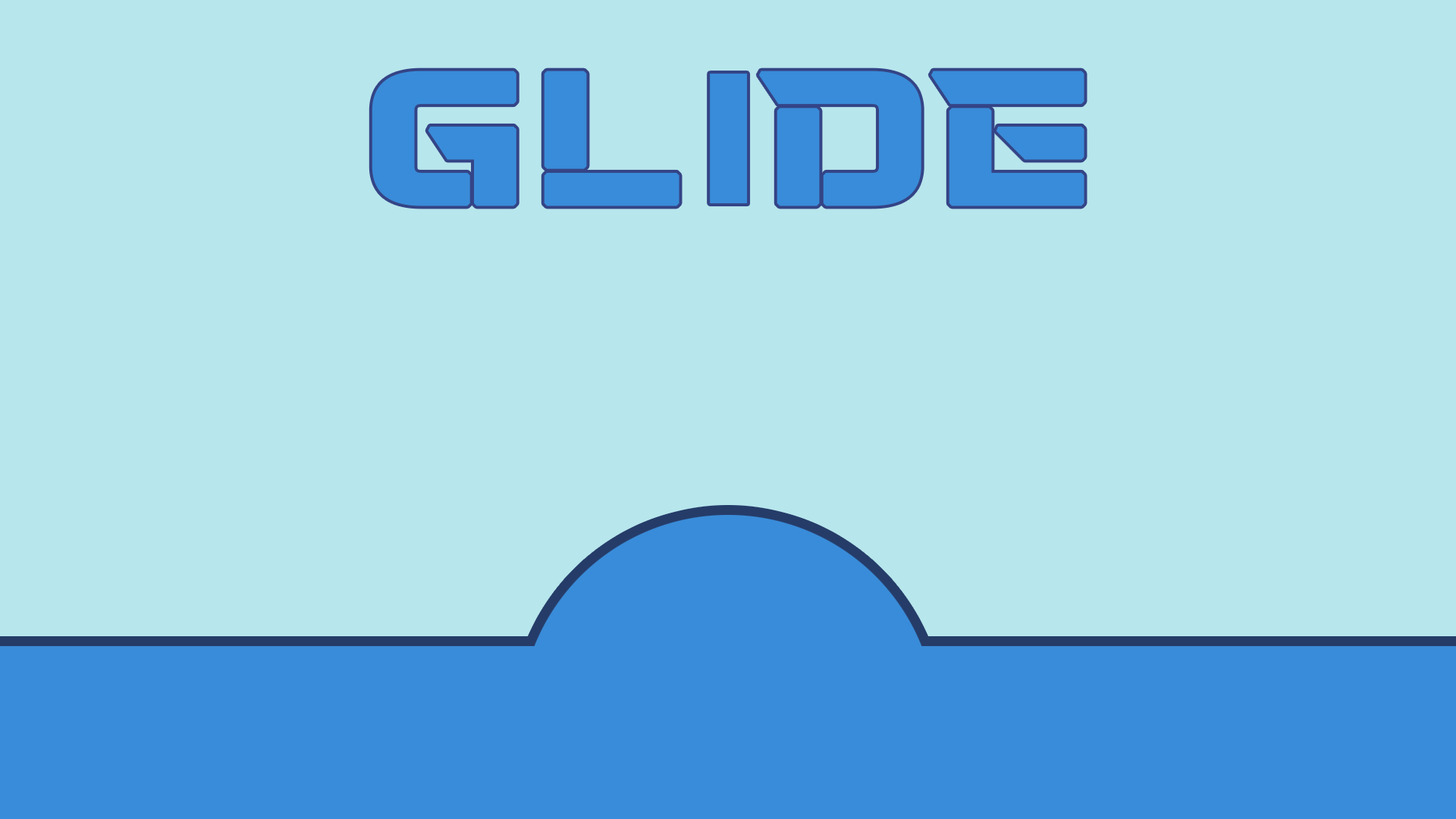
<style>
.page{position:relative;width:1456px;height:819px;background:#b7e6ec}
.page>*{position:absolute;margin:0}
.t1{font:189.6px "Revamped";letter-spacing:0.05em;color:#398cd9;font-weight:bold}
</style>
<div class="page">
<p class="t1" style="left:372px;top:71px;width:712px;height:135px">GLIDE</p>
</div>
